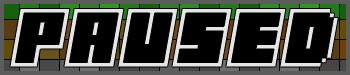
<style>
.page{position:relative;width:350px;height:75px;background:#000000}
.page>*{position:absolute;margin:0}
.t1{font:72px "Blocked";color:#e5e5e5;font-style:italic}
</style>
<div class="page">
<p class="t1" style="left:10px;top:8px;width:329px;height:59px">PAUSED</p>
</div>
